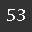
<style>
.page{position:relative;width:32px;height:32px;background:#333333}
.page>*{position:absolute;margin:0}
.t1{font:17.8px "MyriadPro-Regular";color:#ffffff;scale:1.12 1}
</style>
<div class="page">
<p class="t1" style="left:7px;top:9px;width:18px;height:12px">53</p>
</div>
